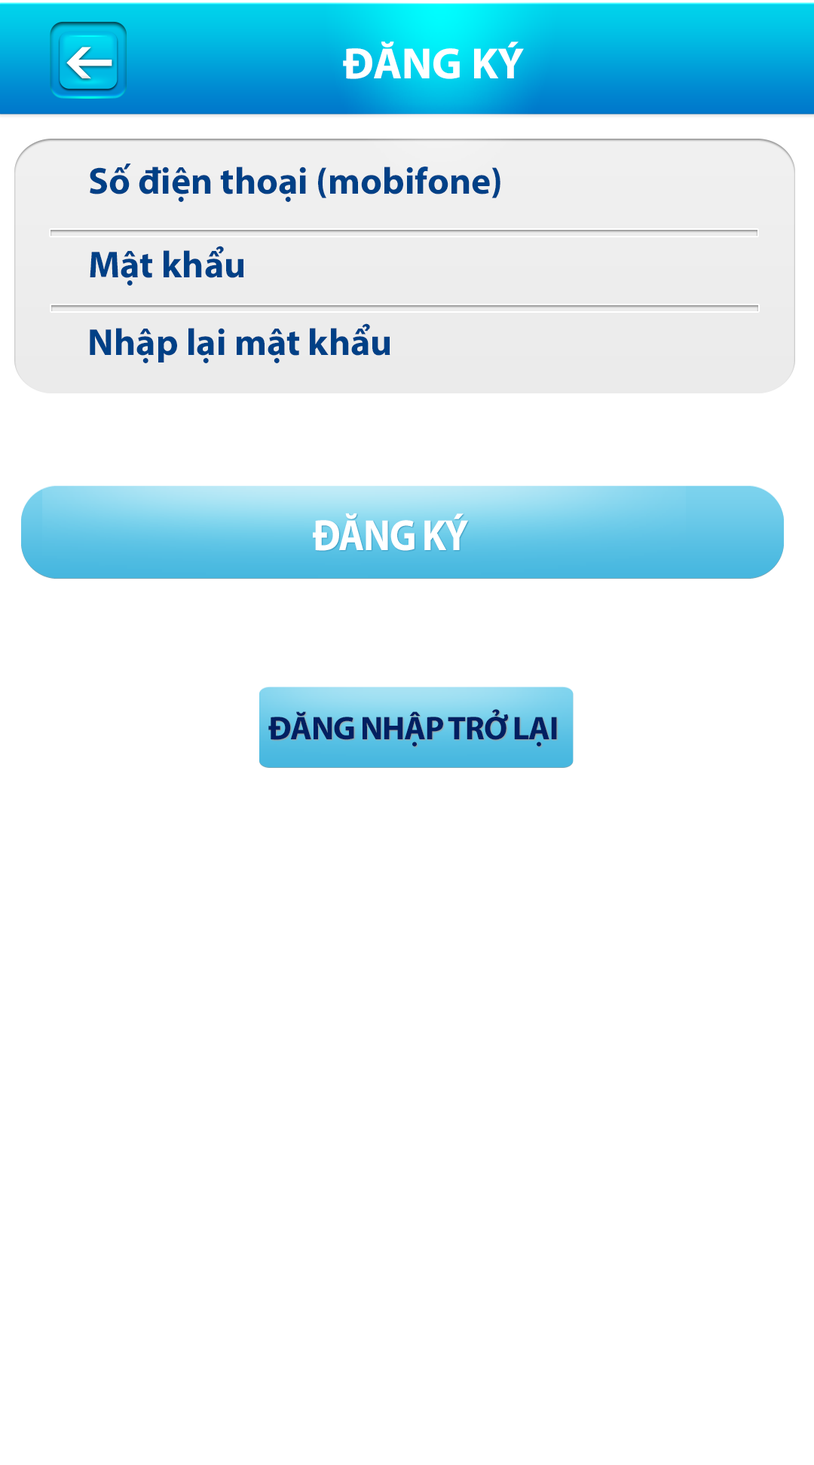
<style>
.page{position:relative;width:814px;height:1465px;background:#ffffff}
.page>*{position:absolute;margin:0}
.t1{font:44px "MyriadPro-Bold";color:#ffffff}
.t2{font:37.7px "MyriadPro-Bold";color:#004086}
.t3{font:44px "MyriadPro-Bold";letter-spacing:-0.025em;color:#ffffff;scale:0.89 1}
.t4{font:33px "MyriadPro-Bold";letter-spacing:-0.025em;color:#011f61}
</style>
<div class="page">
<p class="t1" style="left:343px;top:41px;width:181px;height:38px">ĐĂNG KÝ</p>
<p class="t2" style="left:90px;top:164px;width:410px;height:38px">Số điện thoại (mobifone)</p>
<p class="t2" style="left:90px;top:246px;width:154px;height:40px">Mật khẩu</p>
<p class="t2" style="left:90px;top:323px;width:300px;height:40px">Nhập lại mật khẩu</p>
<p class="t3" style="left:313px;top:513px;width:155px;height:38px">ĐĂNG KÝ</p>
<p class="t4" style="left:268px;top:709px;width:289px;height:38px">ĐĂNG NHẬP TRỞ LẠI</p>
</div>
